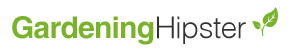
<style>
.page{position:relative;width:290px;height:52px;background:#ffffff}
.page>*{position:absolute;margin:0}
.t1{font:30px "Helvetica-Bold";letter-spacing:-0.025em;color:#79b32a}
.t2{font:30px "HelveticaLight";letter-spacing:-0.025em;color:#333333}
</style>
<div class="page">
<p class="t1" style="left:12px;top:16px;width:234px;height:29px">Gardening<span class="t2">Hipster</span></p>
</div>
